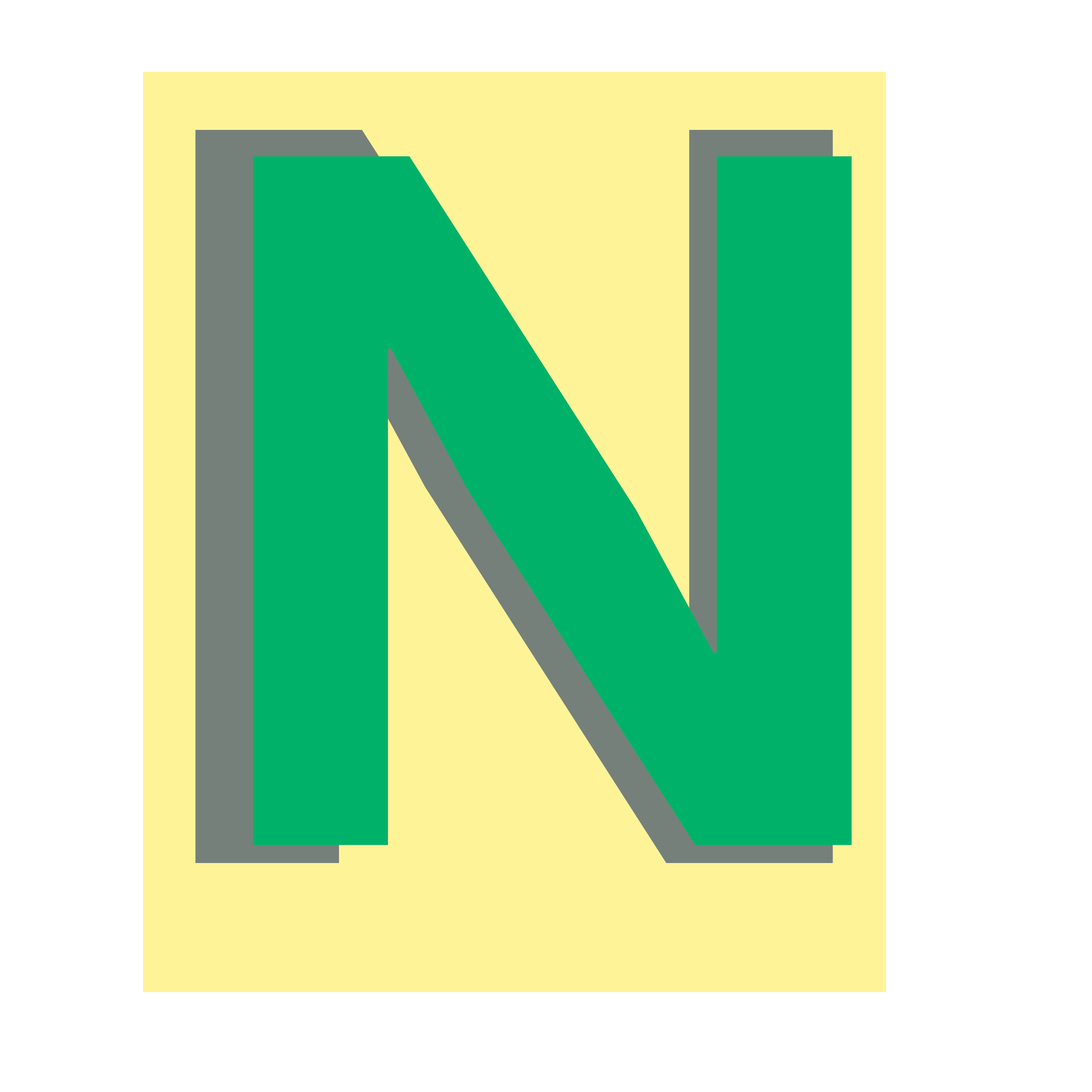
<style>
.page{position:relative;width:1092px;height:1092px;background:#ffffff}
.page>*{position:absolute;margin:0}
.t1{font:1050.2px "IBMPlexSans-SemiBold";color:#00b269;scale:1.09 1}
.t2{font:986.3px "IBMPlexSans-SemiBold";color:#00b269;scale:1.09 1}
</style>
<div class="page">
<p class="t1" style="left:195px;top:130px;width:638px;height:733px">N</p>
<p class="t2" style="left:253px;top:156px;width:599px;height:689px">N</p>
</div>
